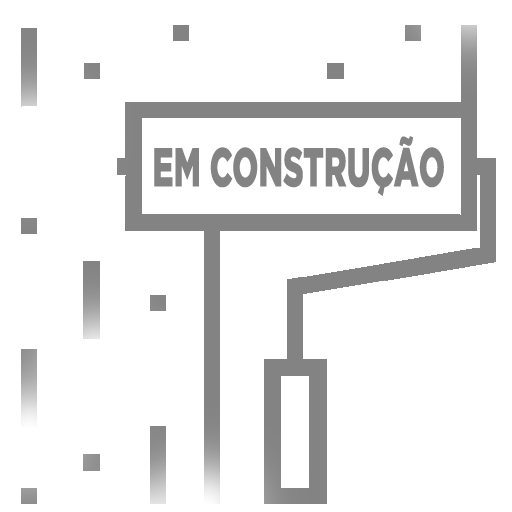
<style>
.page{position:relative;width:512px;height:512px;background:#ffffff}
.page>*{position:absolute;margin:0}
.t1{font:54.6px "Gotham-Black";color:#838383;text-transform:uppercase;scale:0.58 1}
</style>
<div class="page">
<p class="t1" style="left:154px;top:136px;width:290px;height:60px">EM CONSTRUÇÃO</p>
</div>
